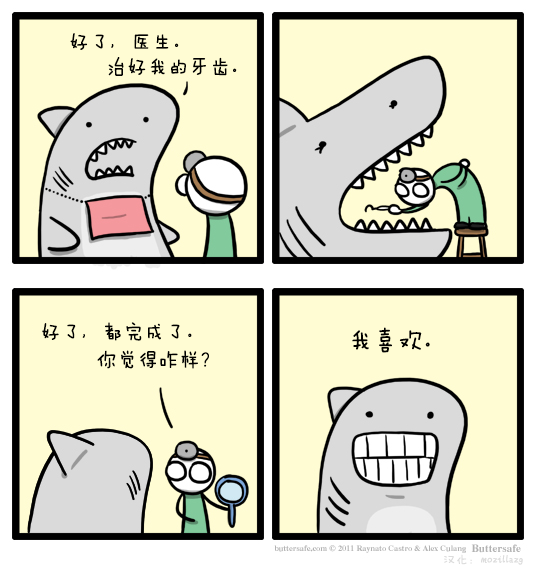
<style>
.page{position:relative;width:536px;height:568px;background:#fffcd3}
.page>*{position:absolute;margin:0}
.t1{font:20.8px/25px "FZMWJW--GB1-0";color:#000000}
.t2{font:20.8px "FZMWJW--GB1-0";color:#000000}
.t3{font:25px "FZMWJW--GB1-0";color:#000000}
.t4{font:12.5px "FZMWJW--GB1-0";color:#dcdcdc}
</style>
<div class="page">
<p class="t1" style="left:70px;top:33px;width:167px;height:43px">好了，医生。<br>      治好我的牙齿。</p>
<p class="t2" style="left:42px;top:322px;width:150px;height:19px">好了，都完成了。</p>
<p class="t3" style="left:352px;top:327px;width:78px;height:26px">我喜欢。</p>
<p class="t2" style="left:97px;top:350px;width:112px;height:19px">你觉得咋样？</p>
<p class="t4" style="left:444px;top:554px;width:79px;height:11px">汉化：mozillazg</p>
</div>
